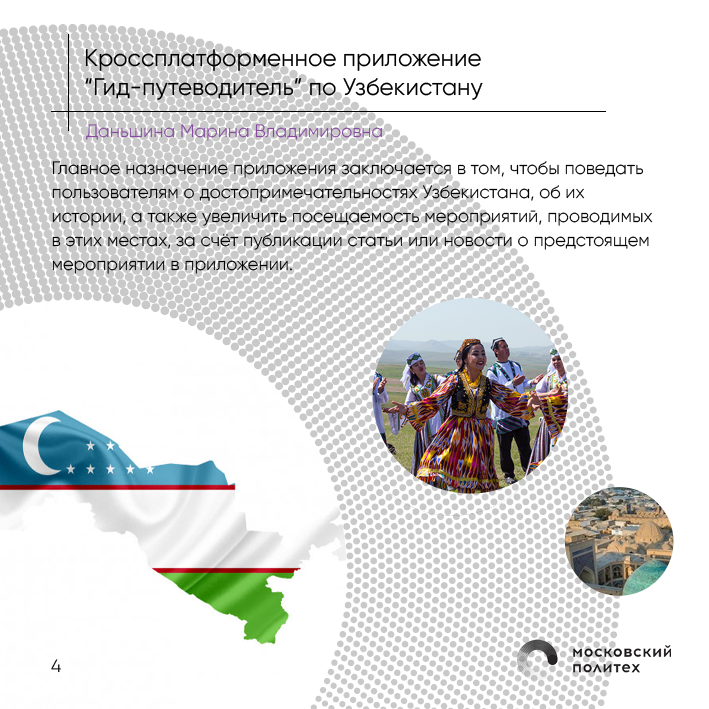
<style>
.page{position:relative;width:709px;height:709px;background:#ffffff}
.page>*{position:absolute;margin:0}
.t1{font:24px "Gilroy-Regular";color:#000000}
.t2{font:18px "Gilroy-Light";color:#874ba0}
.t3{font:18px/24px "Gilroy-Light";color:#000000}
.t4{font:18px "Gilroy-Light"}
</style>
<div class="page">
<p class="t1" style="left:85px;top:49px;width:398px;height:51px">Кроссплатформенное приложение <br>“Гид-путеводитель” по Узбекистану</p>
<p class="t2" style="left:86px;top:124px;width:296px;height:17px">Даньшина Марина Владимировна</p>
<p class="t3" style="left:52px;top:161px;width:601px;height:113px">Главное назначение приложения заключается в том, чтобы поведать<br>пользователям о достопримечательностях Узбекистана, об их истории, а также увеличить посещаемость мероприятий, проводимых в этих местах, за счёт публикации статьи или новости о предстоящем мероприятии в приложении.</p>
<p class="t4" style="left:51px;top:659px;width:10px;height:14px">4</p>
</div>
